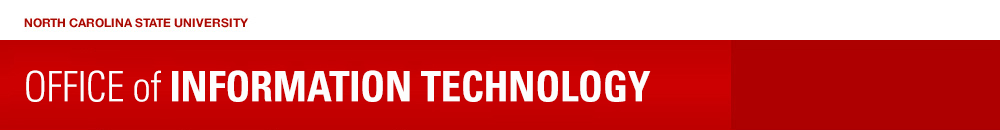
<style>
.page{position:relative;width:1000px;height:130px;background:#ffffff}
.page>*{position:absolute;margin:0}
.t1{font:42px "Univers-CondensedBold";letter-spacing:-0.02em;color:#fdfdfd}
.t2{font:42px "Univers-CondensedLight";letter-spacing:-0.02em;color:#fdfdfd}
</style>
<div class="page">
<p class="t1" style="left:26px;top:70px;width:625px;height:32px"><span class="t2">OFFICE of </span>INFORMATION TECHNOLOGY</p>
</div>
